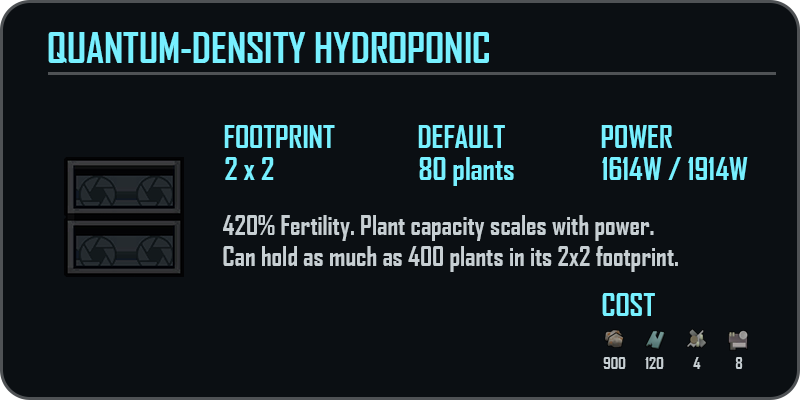
<style>
.page{position:relative;width:800px;height:400px;background:#0b0f13}
.page>*{position:absolute;margin:0}
.t1{font:40px "AgencyFB-Bold";color:#77f0ff}
.t2{font:30px "AgencyFB-Bold";color:#77f0ff}
.t3{font:26px "AgencyFB-Bold";color:#c7cfd3}
.t4{font:16px "AgencyFB-Bold";color:#c7cfd3}
</style>
<div class="page">
<p class="t1" style="left:48px;top:32px;width:441px;height:31px">QUANTUM-DENSITY HYDROPONIC</p>
<p class="t2" style="left:224px;top:125px;width:111px;height:23px">FOOTPRINT</p>
<p class="t2" style="left:418px;top:125px;width:87px;height:23px">DEFAULT</p>
<p class="t2" style="left:601px;top:125px;width:71px;height:23px">POWER</p>
<p class="t2" style="left:225px;top:157px;width:49px;height:23px">2 x 2</p>
<p class="t2" style="left:419px;top:157px;width:95px;height:29px">80 plants</p>
<p class="t2" style="left:602px;top:157px;width:146px;height:23px">1614W / 1914W</p>
<p class="t3" style="left:223px;top:215px;width:455px;height:57px">420% Fertility. Plant capacity scales with power. <br>Can hold as much as 400 plants in its 2x2 footprint.</p>
<p class="t2" style="left:602px;top:293px;width:53px;height:23px">COST</p>
<p class="t4" style="left:603px;top:357px;width:23px;height:12px">900</p>
<p class="t4" style="left:645px;top:357px;width:19px;height:12px">120</p>
<p class="t4" style="left:693px;top:357px;width:8px;height:12px">4</p>
<p class="t4" style="left:735px;top:357px;width:8px;height:12px">8</p>
</div>
